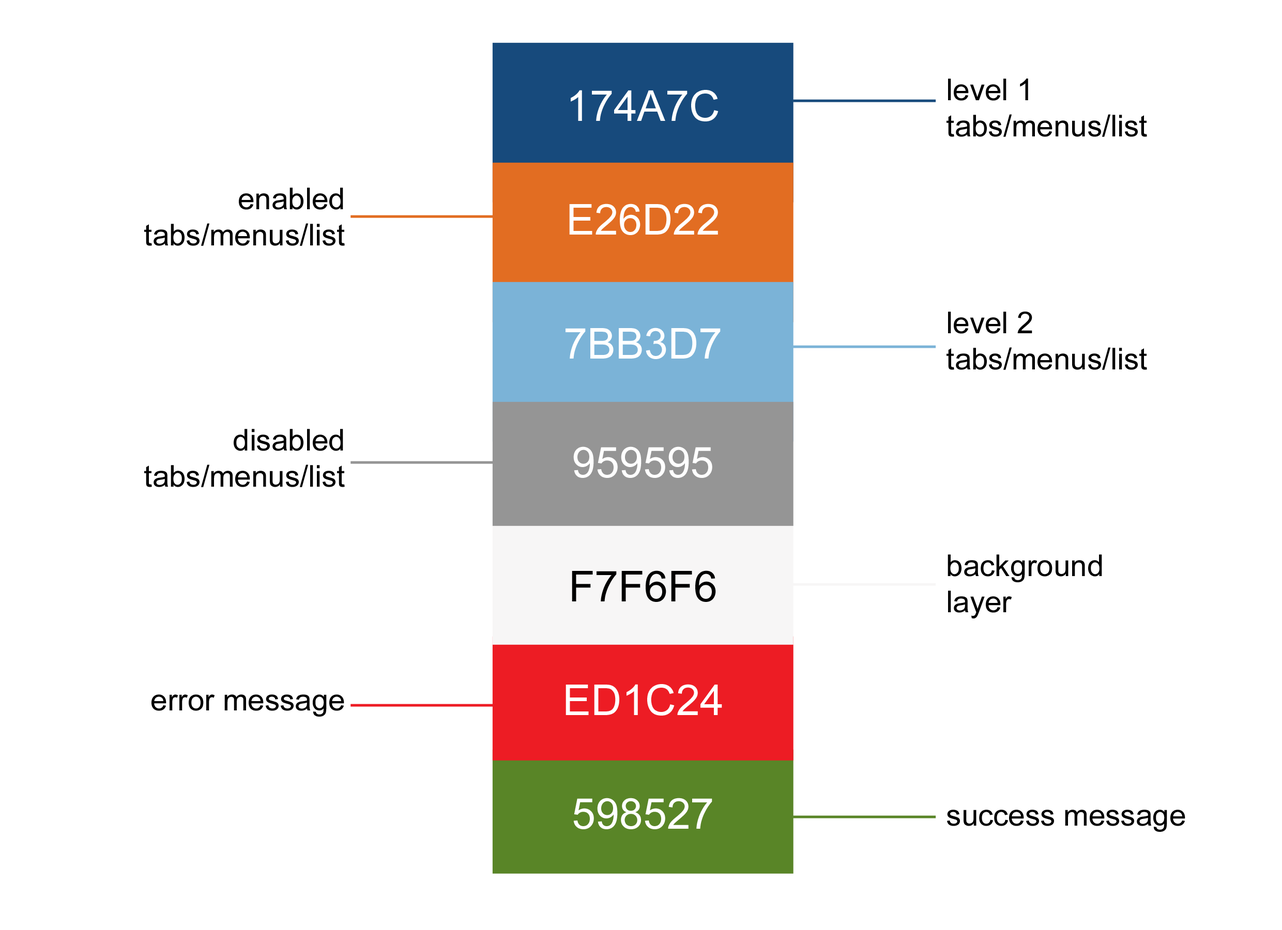
<style>
.page{position:relative;width:1282px;height:930px;background:#ffffff}
.page>*{position:absolute;margin:0}
.t1{font:42.6px "ArialMT";color:#ffffff;text-transform:uppercase}
.t2{font:30.1px "ArialMT";color:#000000}
.t3{font:42.6px "ArialMT";color:#000000;text-transform:uppercase}
</style>
<div class="page">
<p class="t1" style="left:571px;top:90px;width:147px;height:31px">174a7c</p>
<p class="t2" style="left:946px;top:79px;width:201px;height:58px">level 1 tabs/menus/list</p>
<p class="t2" style="left:144px;top:188px;width:201px;height:58px;text-align:right">enabled tabs/menus/list</p>
<p class="t1" style="left:569px;top:204px;width:149px;height:31px">e26d22</p>
<p class="t2" style="left:946px;top:312px;width:201px;height:58px">level 2 tabs/menus/list</p>
<p class="t1" style="left:565px;top:328px;width:155px;height:31px">7bb3d7</p>
<p class="t2" style="left:144px;top:429px;width:201px;height:58px;text-align:right">disabled tabs/menus/list</p>
<p class="t1" style="left:573px;top:447px;width:139px;height:31px">959595</p>
<p class="t2" style="left:947px;top:555px;width:155px;height:64px">background layer</p>
<p class="t3" style="left:572px;top:571px;width:144px;height:31px">f7f6f6</p>
<p class="t1" style="left:565px;top:684px;width:157px;height:32px">ed1c24</p>
<p class="t2" style="left:151px;top:695px;width:193px;height:22px">error message</p>
<p class="t1" style="left:573px;top:798px;width:139px;height:32px">598527</p>
<p class="t2" style="left:947px;top:810px;width:238px;height:22px">success message</p>
</div>
